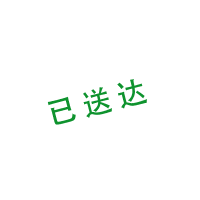
<style>
.page{position:relative;width:200px;height:200px;background:#ffffff}
.page>*{position:absolute;margin:0}
.t1{font:30px "AdobeHeitiStd-Regular";letter-spacing:0.2em;color:#0e932e}
</style>
<div class="page">
<p class="t1" style="left:47px;top:79px;width:100px;height:46px;rotate:-15deg">已送达</p>
</div>
